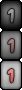
<style>
.page{position:relative;width:22px;height:90px}
.page>*{position:absolute;margin:0}
.t1{font:18px "FFADMatro"}
.t2{font:18px "FFADMatro";color:#e47c7c}
</style>
<div class="page">
<p class="t1" style="left:8px;top:9px;width:6px;height:14px">1</p>
<p class="t1" style="left:8px;top:39px;width:7px;height:14px">1</p>
<p class="t2" style="left:7px;top:69px;width:7px;height:14px">1</p>
</div>
